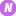
<style>
.page{position:relative;width:16px;height:16px;background:#c964ee}
.page>*{position:absolute;margin:0}
.t1{font:10px "HeadlineR-HM";color:#fbf8f8;font-style:italic}
</style>
<div class="page">
<p class="t1" style="left:4px;top:3px;width:9px;height:9px">N</p>
</div>
